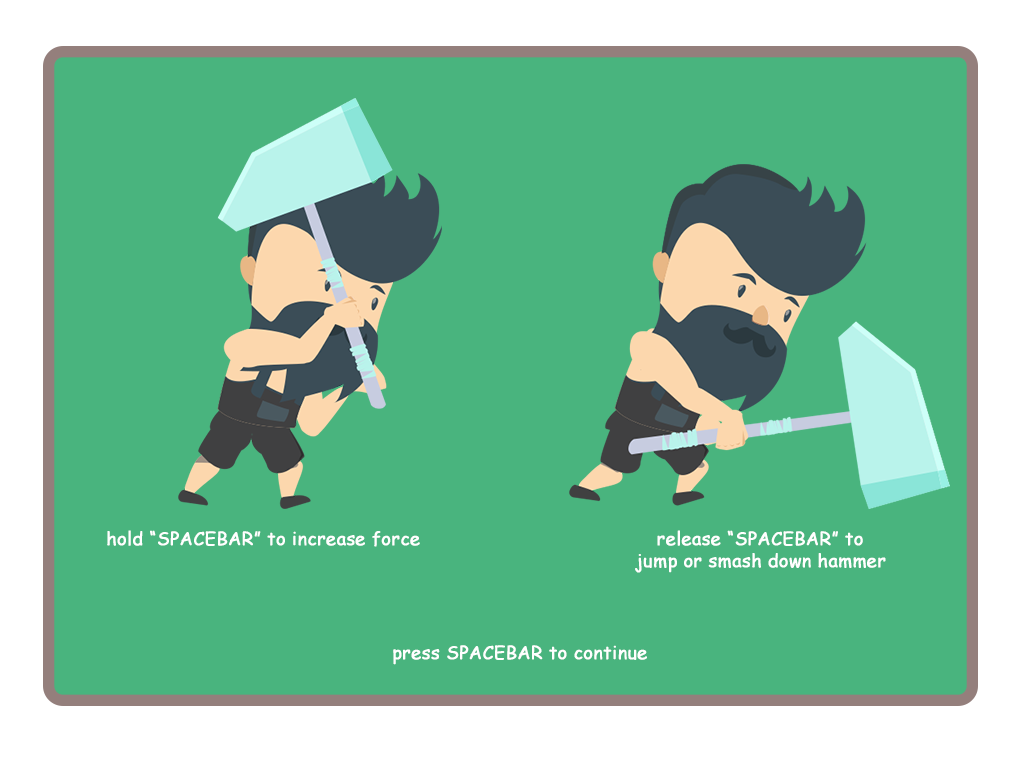
<style>
.page{position:relative;width:1024px;height:768px;background:#49b47e}
.page>*{position:absolute;margin:0}
.t1{font:18px "ComicSansMS";color:#ffffff;font-weight:bold}
</style>
<div class="page">
<p class="t1" style="left:107px;top:530px;width:313px;height:17px">hold “SPACEBAR” to increase force</p>
<p class="t1" style="left:635px;top:530px;width:251px;height:43px;text-align:center">release “SPACEBAR” to <br>jump or smash down hammer</p>
<p class="t1" style="left:393px;top:645px;width:254px;height:20px">press SPACEBAR to continue</p>
</div>
